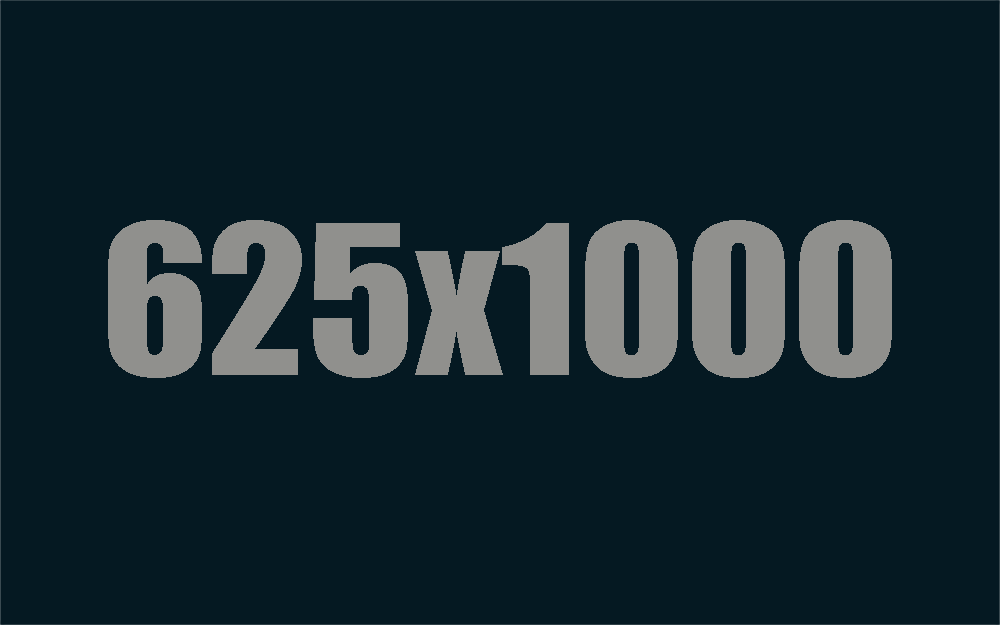
<style>
.page{position:relative;width:1000px;height:625px;background:#051922}
.page>*{position:absolute;margin:0}
.t1{font:191.9px "Impact";color:#90908d;scale:1.04 1}
</style>
<div class="page">
<p class="t1" style="left:108px;top:220px;width:784px;height:158px">625x1000</p>
</div>
